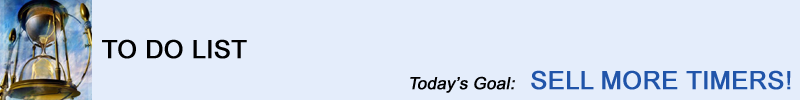
<style>
.page{position:relative;width:800px;height:100px;background:#e4edfb}
.page>*{position:absolute;margin:0}
.t1{font:25px "ArialMT";color:#000000;font-weight:bold}
.t2{font:25px "ArialMT";color:#2054a9;font-weight:bold}
.t3{font:16.7px "ArialMT";color:#000000;font-weight:bold;font-style:italic}
</style>
<div class="page">
<p class="t1" style="left:102px;top:39px;width:145px;height:20px">TO DO LIST</p>
<p class="t2" style="left:410px;top:70px;width:381px;height:23px"><span class="t3">Today’s Goal:  </span>SELL MORE TIMERS!</p>
</div>
